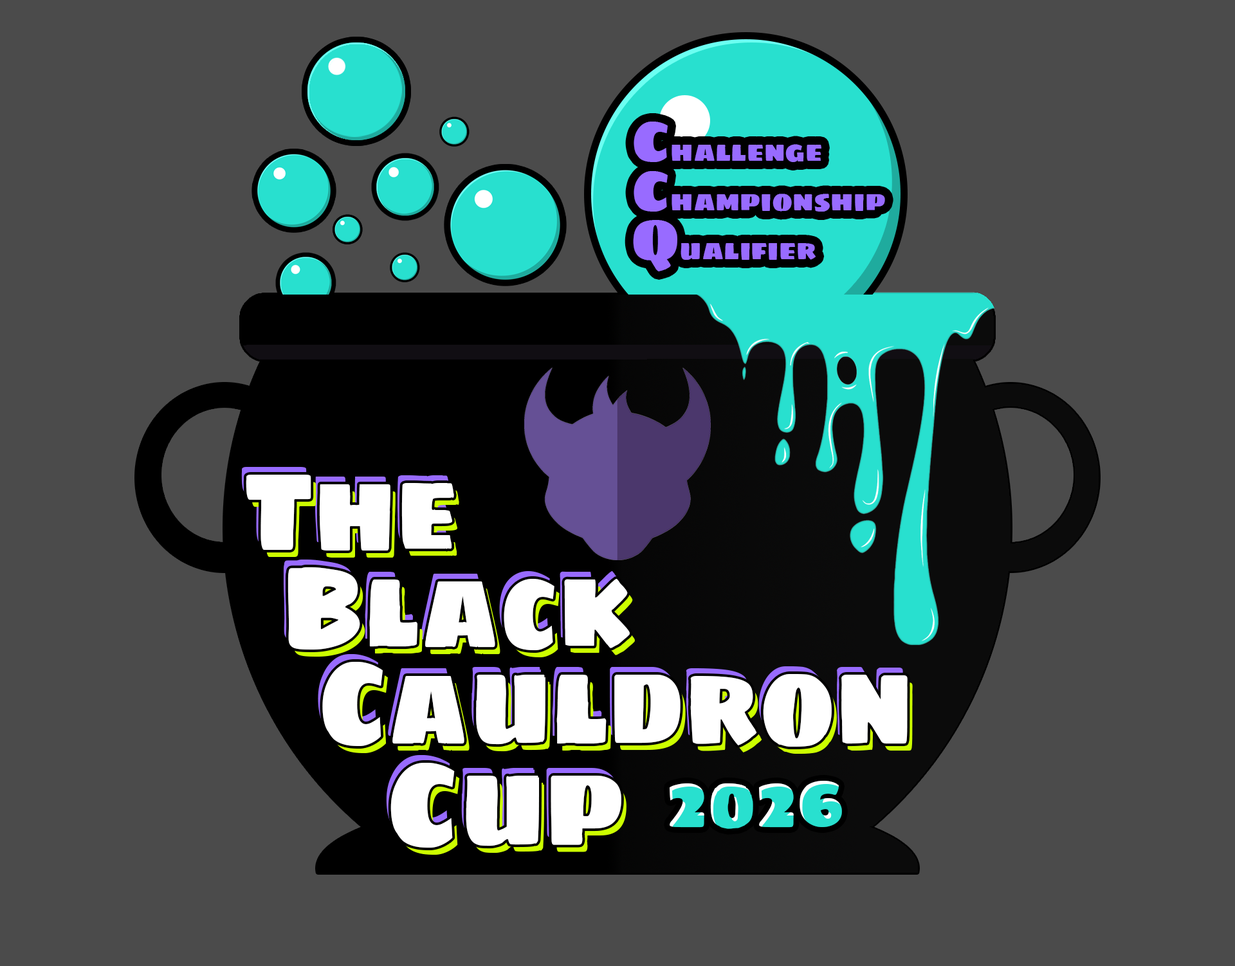
<style>
.page{position:relative;width:1235px;height:966px;background:#4b4b4b}
.page>*{position:absolute;margin:0}
.t1{font:27.6px/49.2px "SigmarOne-Regular";color:#986bff}
.t2{font:57.1px/49.2px "SigmarOne-Regular";color:#986bff}
.t3{font:118.1px/96.5px "SigmarOne-Regular";color:#ffffff;scale:0.86 1}
.t4{font:80.1px/93.8px "SigmarOne-Regular";color:#ffffff;scale:0.87 1}
.t5{font:114px/93.8px "SigmarOne-Regular";color:#ffffff;scale:0.87 1}
.t6{font:114px/96.5px "SigmarOne-Regular";color:#ffffff;scale:0.87 1}
.t7{font:119px/101.8px "SigmarOne-Regular";color:#ffffff;scale:0.9 1}
.t8{font:72.7px "SigmarOne-Regular";color:#28e0cf;scale:0.91 1}
</style>
<div class="page">
<p class="t1" style="left:633px;top:122px;width:252px;height:149px"><span class="t2"><br>C</span>hallenge<span class="t2"><br>C</span>hampionship<span class="t2"> <br>Q</span>ualifier</p>
<p class="t3" style="left:246px;top:475px;width:661px;height:373px"><span class="t4"> </span><span class="t5">The <br>   </span><span class="t6">Black<br>    </span>Cauldron<br>      <span class="t7">Cup</span></p>
<p class="t8" style="left:669px;top:781px;width:173px;height:48px">2026</p>
</div>
